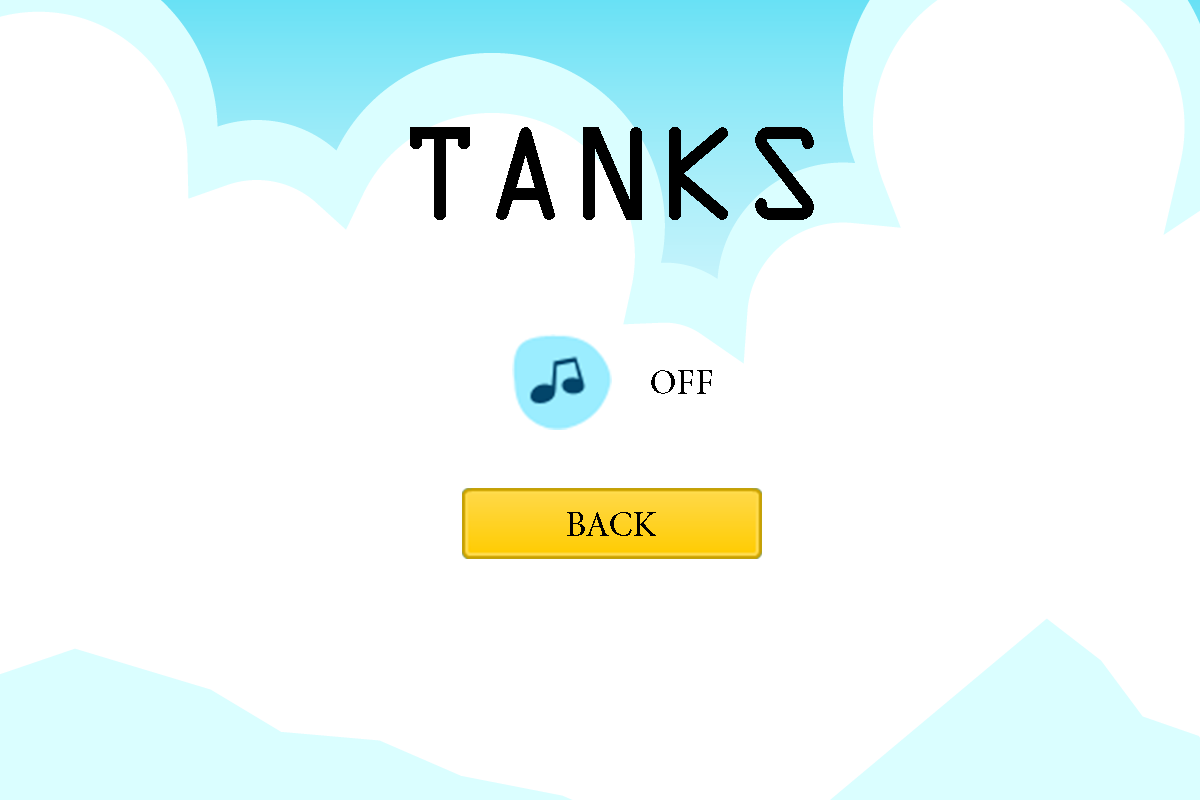
<style>
.page{position:relative;width:1200px;height:800px;background:#ffffff}
.page>*{position:absolute;margin:0}
.t1{font:120px "OCRAStd";color:#000000}
.t2{font:36px "MinionPro-Regular";color:#000000}
</style>
<div class="page">
<p class="t1" style="left:410px;top:127px;width:404px;height:93px">TANKS</p>
<p class="t2" style="left:651px;top:370px;width:61px;height:24px">OFF</p>
<p class="t2" style="left:567px;top:512px;width:89px;height:24px">BACK</p>
</div>
